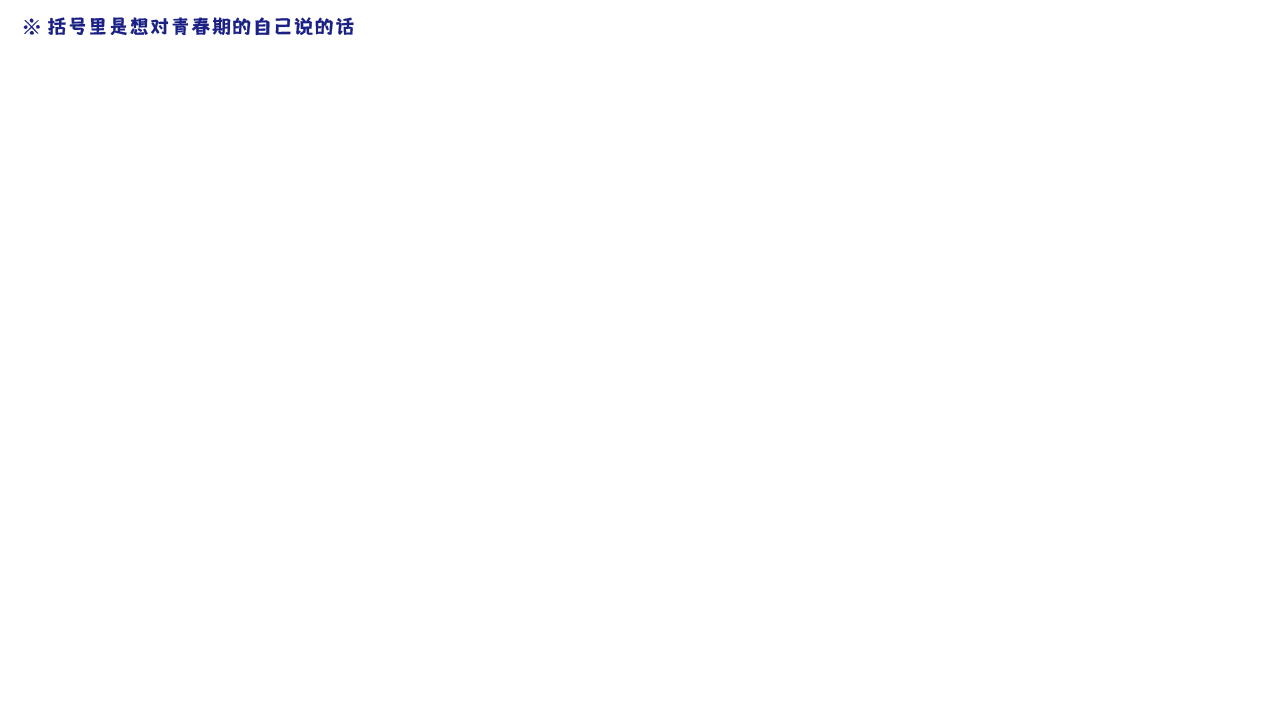
<style>
.page{position:relative;width:1280px;height:720px;background:#ffffff}
.page>*{position:absolute;margin:0}
.t1{font:19.7px "shetumodengxiaofangti";letter-spacing:0.02em;color:#1b2085;text-transform:uppercase;font-weight:bold}
</style>
<div class="page">
<p class="t1" style="left:48px;top:17px;width:306px;height:19px">括号里是想对青春期的自己说的话</p>
</div>
